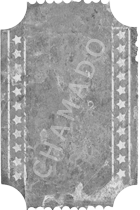
<style>
.page{position:relative;width:140px;height:210px}
.page>*{position:absolute;margin:0}
.t1{font:25px "Tahoma";letter-spacing:0.2em;color:#b6b6b6;font-weight:bold}
</style>
<div class="page">
<p class="t1" style="left:33px;top:38px;width:72px;height:140px;rotate:-66deg">CHAMADO</p>
</div>
